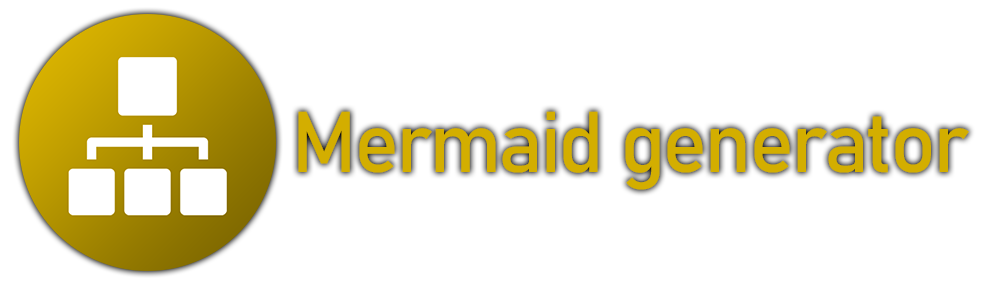
<style>
.page{position:relative;width:1000px;height:285px;background:#ffffff}
.page>*{position:absolute;margin:0}
.t1{font:85px "Bahnschrift";letter-spacing:-0.04em;color:#d3ae00}
</style>
<div class="page">
<p class="t1" style="left:298px;top:111px;width:671px;height:79px">Mermaid generator</p>
</div>
